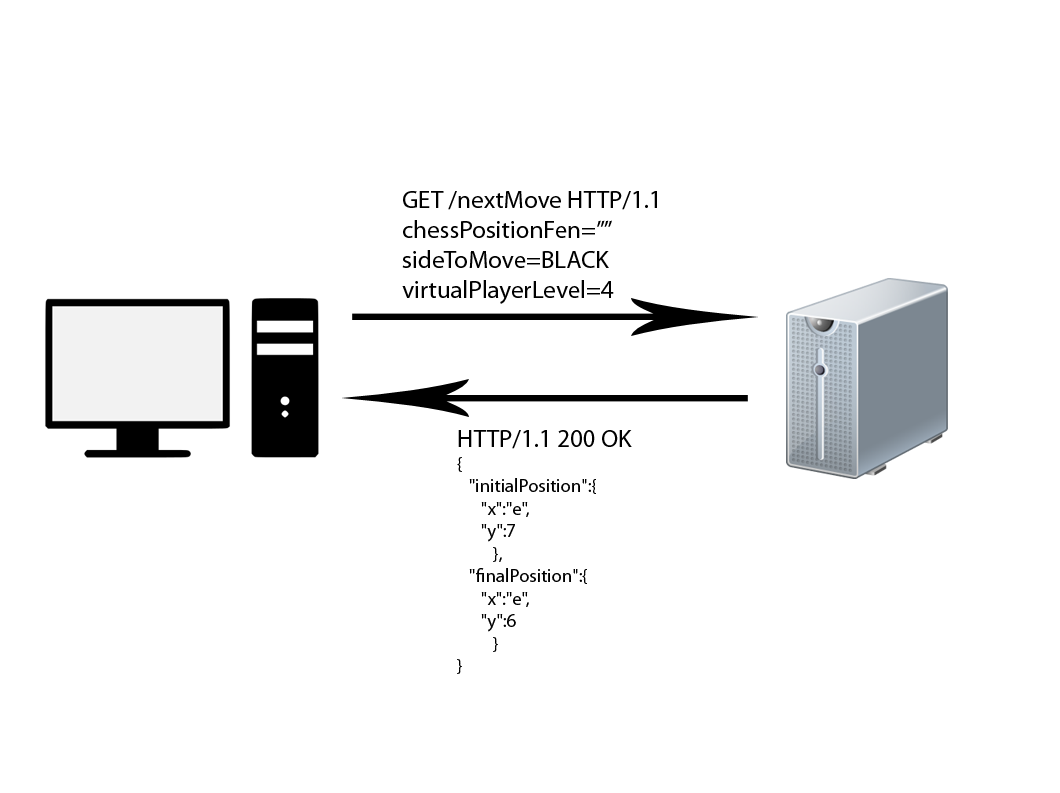
<style>
.page{position:relative;width:1060px;height:793px;background:#ffffff}
.page>*{position:absolute;margin:0}
.t1{font:25px "MyriadPro-Regular";color:#000000}
.t2{font:18.8px "MyriadPro-Regular";color:#000000}
</style>
<div class="page">
<p class="t1" style="left:402px;top:191px;width:255px;height:113px">GET /nextMove HTTP/1.1<br>chessPositionFen=””<br>sideToMove=BLACK<br>virtualPlayerLevel=4</p>
<p class="t2" style="left:457px;top:430px;width:175px;height:244px"><span class="t1">HTTP/1.1 200 OK<br></span>{  <br>   "initialPosition":{  <br>      "x":"e",<br>      "y":7 <br> },<br>   "finalPosition":{  <br>      "x":"e",<br>      "y":6 <br> } <br>}</p>
</div>
